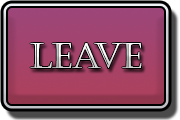
<style>
.page{position:relative;width:180px;height:120px}
.page>*{position:absolute;margin:0}
.t1{font:34.6px "Castellar"}
.t2{font:34.6px "PerpetuaTitlingMT-Bold";scale:0.6 1}
</style>
<div class="page">
<p class="t1" style="left:30px;top:43px;width:112px;height:25px"><span class="t2"><br></span>Leave</p>
</div>
